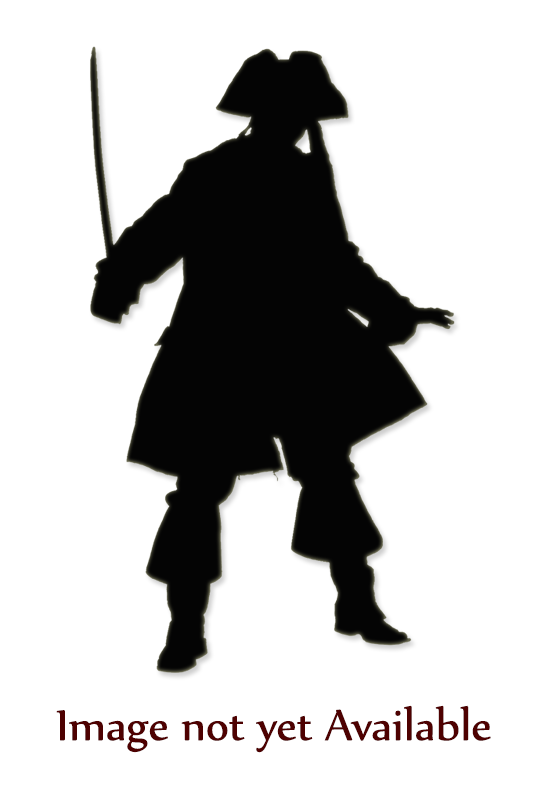
<style>
.page{position:relative;width:533px;height:800px;background:#ffffff}
.page>*{position:absolute;margin:0}
.t1{font:52px "Nyala-Regular";color:#4e0101}
</style>
<div class="page">
<p class="t1" style="left:56px;top:705px;width:435px;height:48px">Image not yet Available</p>
</div>
